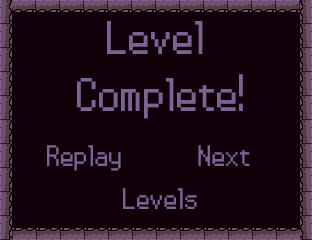
<style>
.page{position:relative;width:312px;height:240px;background:#100009}
.page>*{position:absolute;margin:0}
.t1{font:48px "PowerClear-Regular";color:#7d6393}
.t2{font:30px "PowerClear-Regular";color:#7d6393}
</style>
<div class="page">
<p class="t1" style="left:77px;top:21px;width:166px;height:98px;text-align:center">Level<br> Complete!</p>
<p class="t2" style="left:47px;top:145px;width:74px;height:26px">Replay</p>
<p class="t2" style="left:198px;top:145px;width:52px;height:21px">Next</p>
<p class="t2" style="left:123px;top:188px;width:74px;height:21px">Levels</p>
</div>
